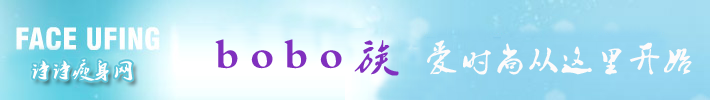
<style>
.page{position:relative;width:710px;height:100px}
.page>*{position:absolute;margin:0}
.t1{font:42.6px "Ò¶¸ùÓÑÃ«±ÊÐÐÊé¼òÌå";letter-spacing:0.24em;color:#8030be}
.t2{font:30.7px "Ò¶¸ùÓÑÃ«±ÊÐÐÊé¼òÌå";letter-spacing:0.1em;color:#fdfbfb}
.t3{font:20.9px "Ò¶¸ùÓÑÃ«±ÊÐÐÊé¼òÌå";color:#fdfbfb}
</style>
<div class="page">
<p class="t1" style="left:215px;top:39px;width:184px;height:37px">bobo族</p>
<p class="t2" style="left:427px;top:40px;width:265px;height:35px">爱时尚从这里开始</p>
<p class="t3" style="left:32px;top:59px;width:101px;height:22px">诗诗瘦身网</p>
</div>
